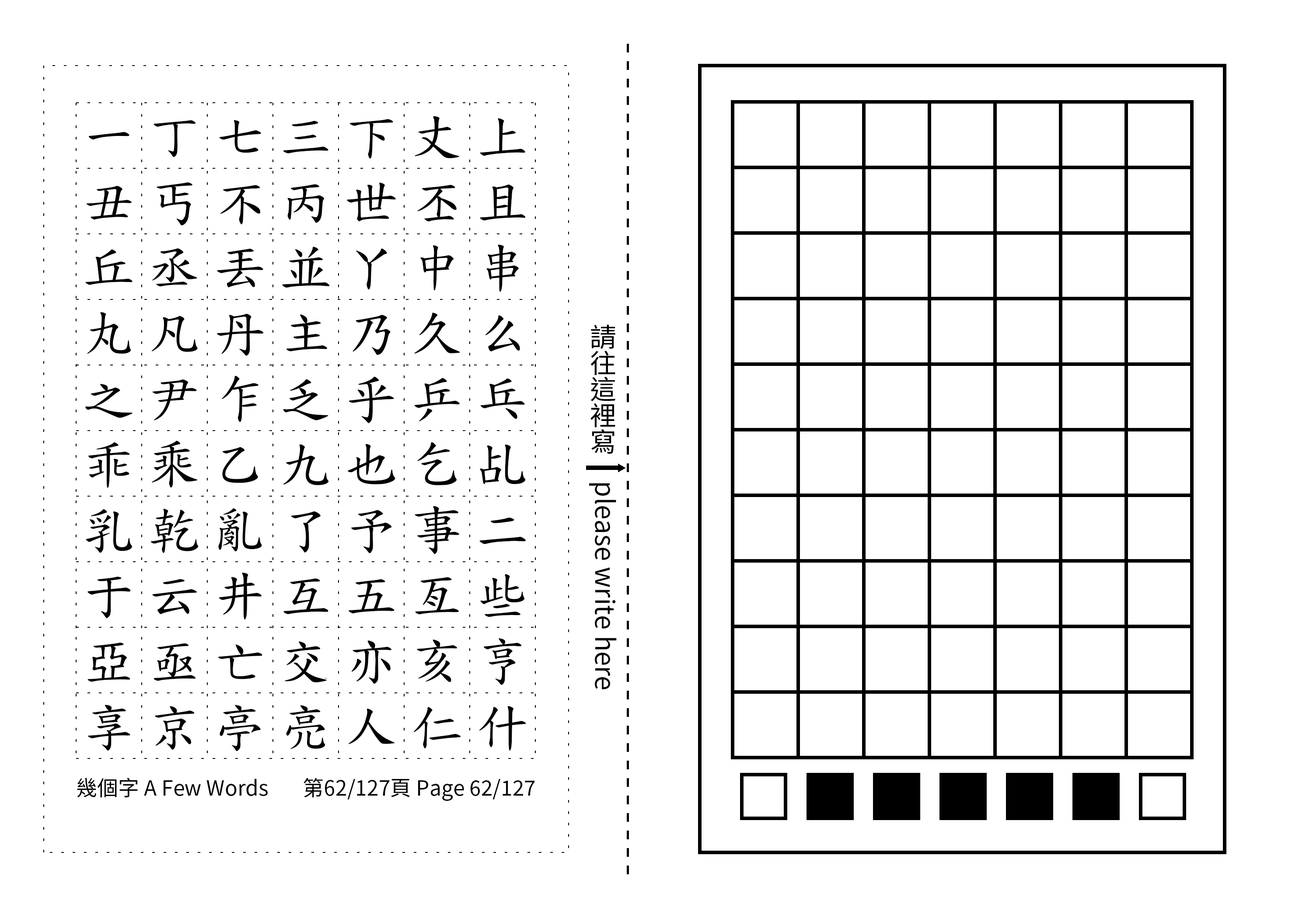
<style>
.page{position:relative;width:1299px;height:918px;background:#ffffff}
.page>*{position:absolute;margin:0}
.t1{font:52.5px/65.6px "TW-Kai-98_1";letter-spacing:0.25em;color:#000000}
.t2{font:26.2px "SourceHanSansTC-Regular";color:#000000}
.t3{font:21px "SourceHanSansTC-Regular";color:#000000}
</style>
<div class="page">
<p class="t1" style="left:85px;top:116px;width:441px;height:636px;text-align:center">一丁七三下丈上丑丐不丙世丕且丘丞丟並丫中串丸凡丹主乃久么之尹乍乏乎乒乓乖乘乙九也乞乩乳乾亂了予事二于云井互五亙些亞亟亡交亦亥亨享京亭亮人仁什</p>
<p class="t2" style="left:589px;top:324px;width:28px;height:366px;text-align:center">請往這裡寫　please write here</p>
<p class="t3" style="left:77px;top:778px;width:191px;height:20px">幾個字 A Few Words</p>
<p class="t3" style="left:303px;top:778px;width:232px;height:23px">第62/127頁 Page 62/127</p>
</div>
